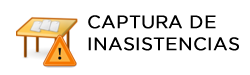
<style>
.page{position:relative;width:250px;height:75px;background:#ffffff}
.page>*{position:absolute;margin:0}
.t1{font:18px/21.6px "GothamBook";color:#000000;font-weight:bold}
</style>
<div class="page">
<p class="t1" style="left:88px;top:15px;width:151px;height:36px">CAPTURA DE INASISTENCIAS</p>
</div>
